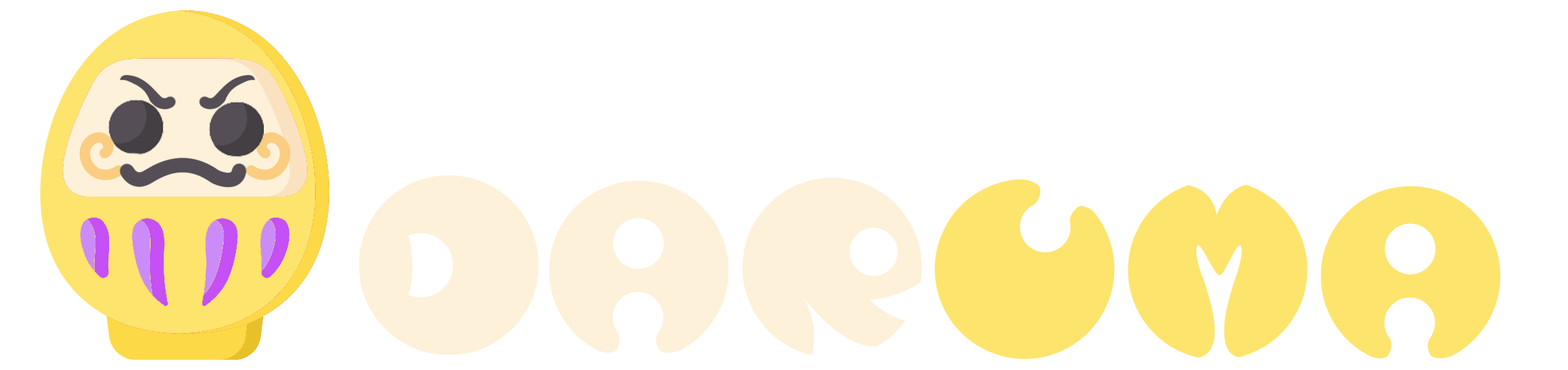
<style>
.page{position:relative;width:1568px;height:370px;background:#ffffff}
.page>*{position:absolute;margin:0}
.t1{font:218.2px "LunaNueva";color:#fef1da}
.t2{font:218.2px "LunaNueva";color:#fde46d}
.t3{font:218.2px "LunaNueva";letter-spacing:-0.1em;color:#fde46d}
</style>
<div class="page">
<p class="t1" style="left:359px;top:175px;width:180px;height:180px">D</p>
<p class="t1" style="left:549px;top:180px;width:180px;height:172px">A</p>
<p class="t1" style="left:742px;top:177px;width:180px;height:178px">R</p>
<p class="t2" style="left:935px;top:179px;width:180px;height:180px;rotate:25deg">U</p>
<p class="t3" style="left:1128px;top:184px;width:373px;height:174px">MA</p>
</div>
